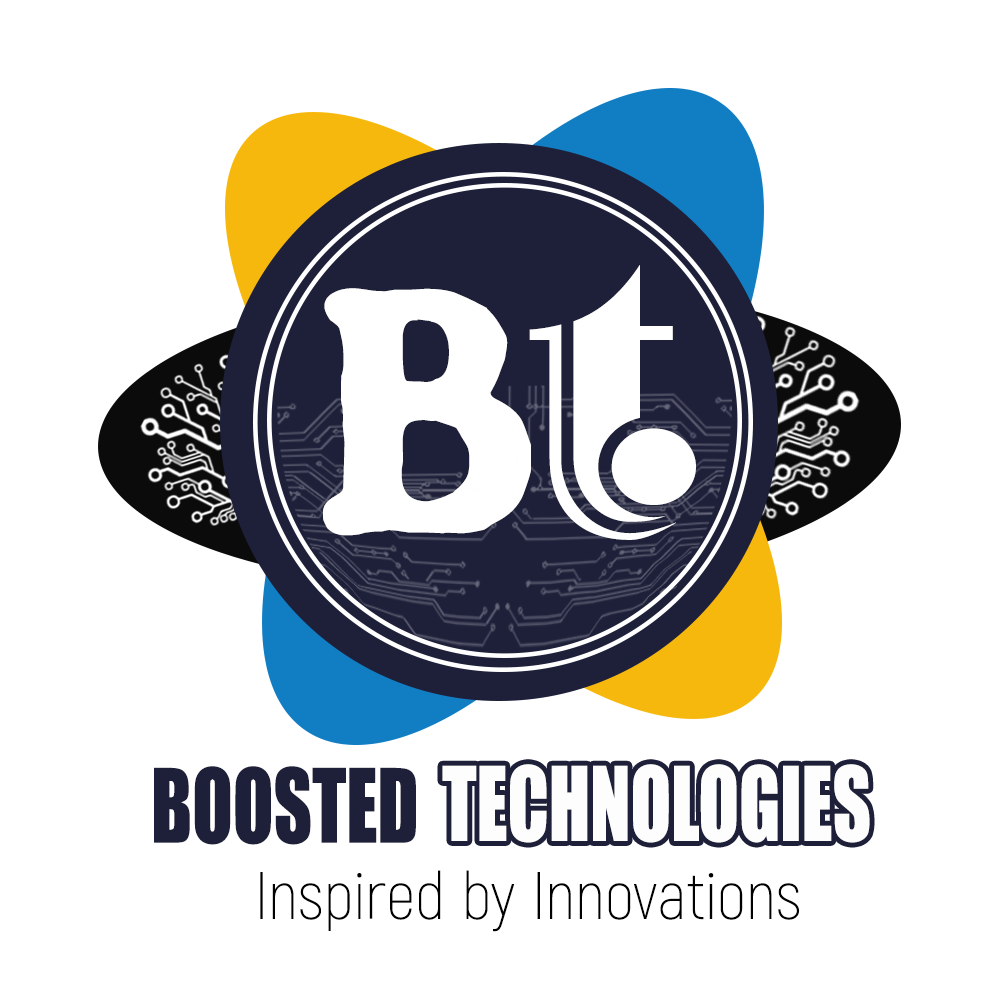
<style>
.page{position:relative;width:1000px;height:1000px;background:#ffffff}
.page>*{position:absolute;margin:0}
.t1{font:363.4px "Garavol";color:#ffffff}
.t2{font:291.1px "Gorilla-Black";color:#ffffff}
.t3{font:94.6px "Impact";color:#1e203a;scale:0.79 1}
.t4{font:94.6px "Impact";color:#fdfdfd;scale:0.79 1}
.t5{font:66.7px "Akrobat-ExtraLight";color:#000000}
</style>
<div class="page">
<p class="t1" style="left:529px;top:265px;width:167px;height:275px">T</p>
<p class="t2" style="left:323px;top:288px;width:208px;height:248px">B</p>
<p class="t3" style="left:154px;top:766px;width:262px;height:79px">BOOSTED</p>
<p class="t4" style="left:442px;top:764px;width:428px;height:79px">TECHNOLOGIES</p>
<p class="t5" style="left:260px;top:870px;width:539px;height:62px">Inspired by Innovations</p>
</div>
